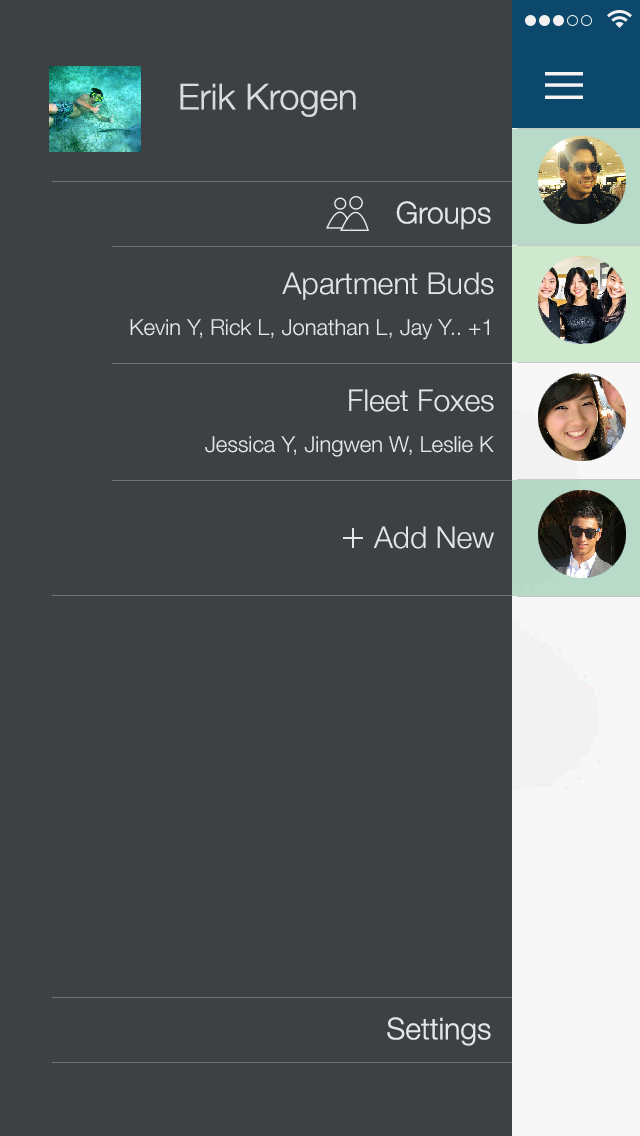
<style>
.page{position:relative;width:640px;height:1136px;background:#3e4143}
.page>*{position:absolute;margin:0}
.t1{font:36px "HelveticaNeue-Light";color:#d7dbde}
.t2{font:30px "HelveticaNeue-Light";color:#e3e7ea}
.t3{font:22px "HelveticaNeue-Light";color:#e3e7ea}
.t4{font:40px "HelveticaNeue-Light";color:#e3e7ea}
</style>
<div class="page">
<p class="t1" style="left:180px;top:83px;width:176px;height:34px">Erik Krogen</p>
<p class="t2" style="left:396px;top:201px;width:95px;height:29px">Groups</p>
<p class="t2" style="left:282px;top:272px;width:212px;height:28px">Apartment Buds</p>
<p class="t3" style="left:130px;top:319px;width:359px;height:21px">Kevin Y, Rick L, Jonathan L, Jay Y.. +1</p>
<p class="t2" style="left:349px;top:389px;width:145px;height:23px">Fleet Foxes</p>
<p class="t3" style="left:205px;top:436px;width:289px;height:21px">Jessica Y, Jingwen W, Leslie K</p>
<p class="t2" style="left:343px;top:526px;width:151px;height:23px"><span class="t4">+</span> Add New</p>
<p class="t2" style="left:387px;top:1017px;width:104px;height:29px">Settings</p>
</div>
